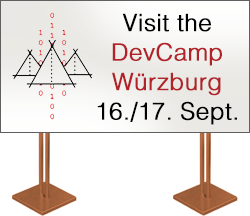
<style>
.page{position:relative;width:250px;height:216px;background:#ffffff}
.page>*{position:absolute;margin:0}
.t1{font:24px/29.5px "Helvetica-Light";color:#b12329;font-weight:bold}
.t2{font:24px/29.5px "Helvetica-Light";color:#000000;font-weight:bold}
</style>
<div class="page">
<p class="t1" style="left:97px;top:13px;width:140px;height:112px;text-align:center"><span class="t2">Visit the<br></span>DevCamp<br>Würzburg<br><span class="t2">16./17. Sept.</span></p>
</div>
